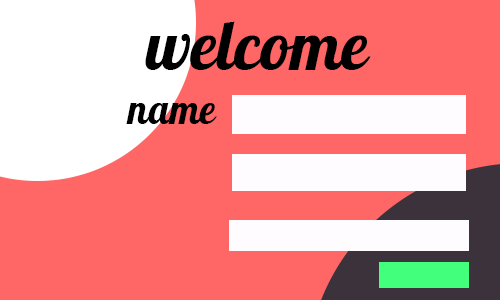
<style>
.page{position:relative;width:500px;height:300px;background:#ff6666}
.page>*{position:absolute;margin:0}
.t1{font:68.1px "Pattaya-Regular";color:#000000}
.t2{font:40.1px "Pattaya-Regular";color:#000000}
</style>
<div class="page">
<p class="t1" style="left:145px;top:21px;width:226px;height:49px">welcome</p>
<p class="t2" style="left:126px;top:103px;width:91px;height:21px">name</p>
</div>
